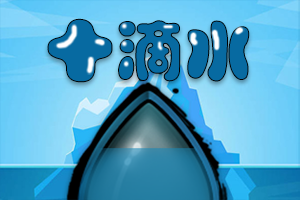
<style>
.page{position:relative;width:300px;height:200px}
.page>*{position:absolute;margin:0}
.t1{font:67px "FZPTYJW--GB1-0";color:#076aa1;font-weight:bold}
</style>
<div class="page">
<p class="t1" style="left:47px;top:18px;width:203px;height:65px">十滴水</p>
</div>
